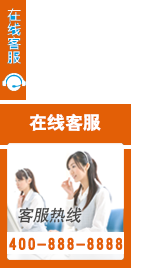
<style>
.page{position:relative;width:149px;height:272px;background:#ffffff}
.page>*{position:absolute;margin:0}
.t1{font:18px "ç»å¸ç²é»ç®-regular";color:#ffffff}
.t2{font:18px "ç»å¸ç²é»ç®-regular";color:#e35f06;font-weight:bold}
</style>
<div class="page">
<p class="t1" style="left:29px;top:113px;width:72px;height:18px">在线客服</p>
<p class="t2" style="left:9px;top:237px;width:114px;height:13px">400-888-8888</p>
</div>
